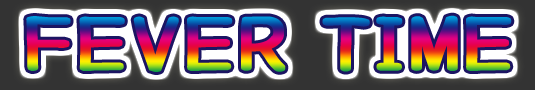
<style>
.page{position:relative;width:535px;height:90px}
.page>*{position:absolute;margin:0}
.t1{font:60px "Jiyucho";font-weight:bold;scale:0.92 1}
</style>
<div class="page">
<p class="t1" style="left:26px;top:15px;width:486px;height:57px">ＦＥＶＥＲ ＴＩＭＥ</p>
</div>
